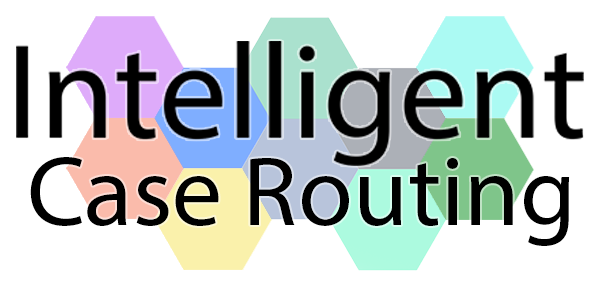
<style>
.page{position:relative;width:600px;height:300px;background:#ffffff}
.page>*{position:absolute;margin:0}
.t1{font:100px "MyriadPro-Regular";color:#000000}
</style>
<div class="page">
<p class="t1" style="left:30px;top:157px;width:540px;height:89px">Case Routing</p>
</div>
